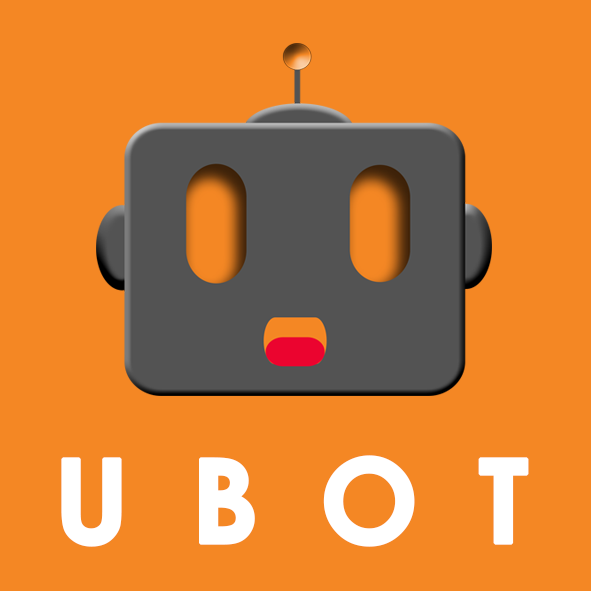
<style>
.page{position:relative;width:591px;height:591px;background:#f48724}
.page>*{position:absolute;margin:0}
.t1{font:116.7px "CenturyGothic-Bold";letter-spacing:0.5em;color:#ffffff;text-transform:uppercase;font-weight:bold}
</style>
<div class="page">
<p class="t1" style="left:61px;top:455px;width:468px;height:92px">uBOT</p>
</div>
